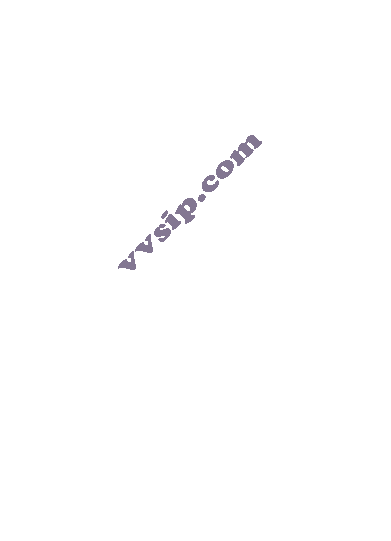
<style>
.page{position:relative;width:391px;height:541px;background:#ffffff}
.page>*{position:absolute;margin:0}
.t1{font:30.4px "CooperBlack";color:#837792;scale:1.22 1}
</style>
<div class="page">
<p class="t1" style="left:118px;top:135px;width:144px;height:135px;rotate:-45deg">vvsip.com</p>
</div>
